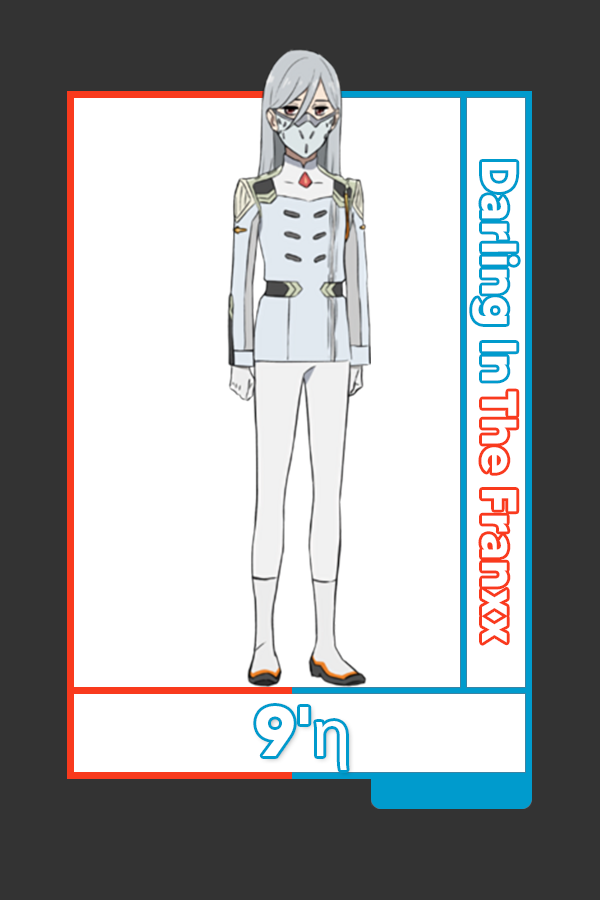
<style>
.page{position:relative;width:600px;height:900px;background:#ffffff}
.page>*{position:absolute;margin:0}
.t1{font:48.8px "MADETOMMY-Bold";color:#ffffff}
.t2{font:70.1px "MADETOMMY-Bold";color:#ffffff}
.t3{font:70.1px "MyriadPro-Regular";color:#ffffff}
</style>
<div class="page">
<p class="t1" style="left:472px;top:162px;width:46px;height:219px;rotate:90deg">Darling In</p>
<p class="t1" style="left:481px;top:391px;width:36px;height:252px;rotate:90deg">The Franxx</p>
<p class="t2" style="left:256px;top:706px;width:91px;height:64px">9'<span class="t3">η</span></p>
</div>
